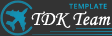
<style>
.page{position:relative;width:112px;height:36px;background:#333333}
.page>*{position:absolute;margin:0}
.t1{font:20px "MonotypeCorsiva";color:#ffffff}
</style>
<div class="page">
<p class="t1" style="left:31px;top:11px;width:80px;height:17px">TDK Team</p>
</div>
